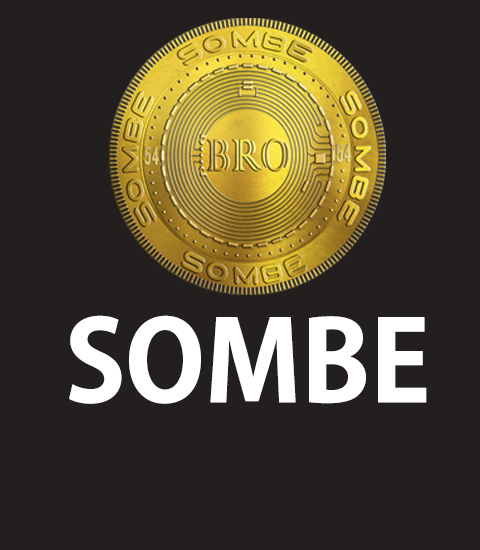
<style>
.page{position:relative;width:480px;height:550px;background:#231f1f}
.page>*{position:absolute;margin:0}
.t1{font:110px "AdobeGothicStd-Bold";letter-spacing:-0.025em;color:#ffffff;font-weight:bold}
</style>
<div class="page">
<p class="t1" style="left:69px;top:315px;width:358px;height:89px">SOMBE</p>
</div>
